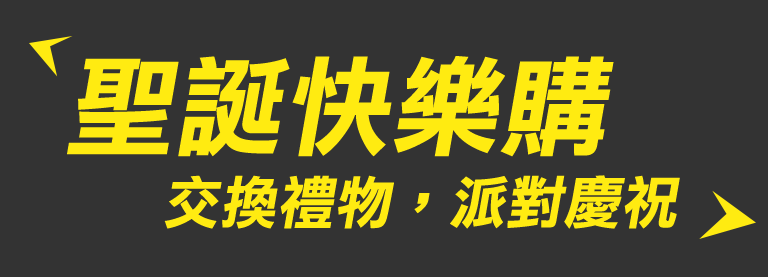
<style>
.page{position:relative;width:768px;height:277px;background:#333333}
.page>*{position:absolute;margin:0}
.t1{font:109.9px "DFLiHei-Bd-HK-BF";color:#ffeb11}
.t2{font:58.1px "DFLiHei-Bd-HK-BF";color:#ffeb11}
</style>
<div class="page">
<p class="t1" style="left:67px;top:56px;width:547px;height:101px">聖誕快樂購</p>
<p class="t2" style="left:164px;top:175px;width:516px;height:54px">交換禮物，派對慶祝</p>
</div>
